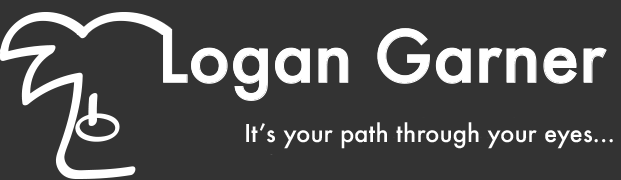
<style>
.page{position:relative;width:621px;height:180px;background:#333333}
.page>*{position:absolute;margin:0}
.t1{font:24px "Futura-Medium";color:#ffffff}
</style>
<div class="page">
<p class="t1" style="left:246px;top:122px;width:367px;height:27px">It’s your path through your eyes...</p>
</div>
